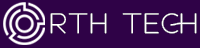
<style>
.page{position:relative;width:200px;height:48px;background:#2f0247}
.page>*{position:absolute;margin:0}
.t1{font:27.7px "Roger-Bold";color:#ffffff}
</style>
<div class="page">
<p class="t1" style="left:50px;top:13px;width:147px;height:21px">RTH TECH</p>
</div>
